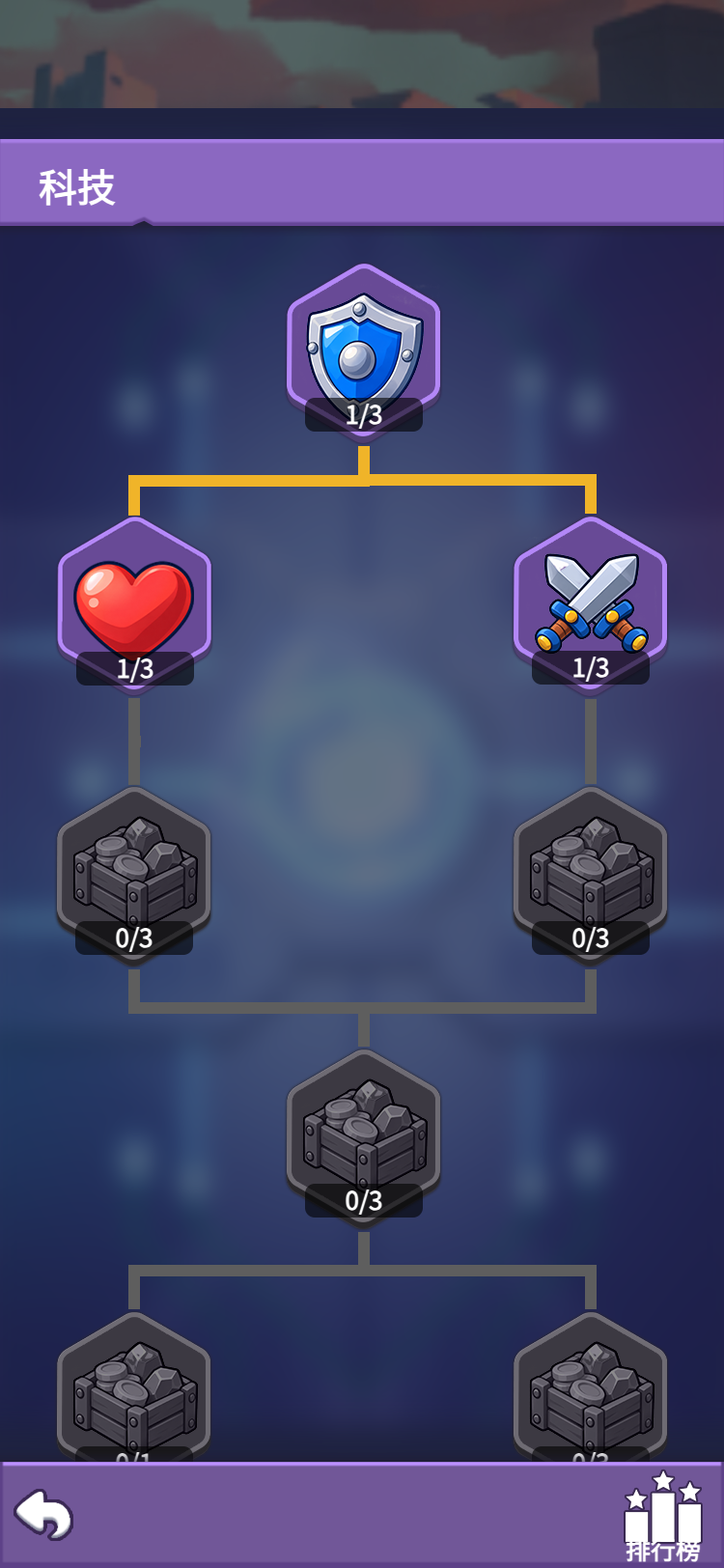
<style>
.page{position:relative;width:724px;height:1568px}
.page>*{position:absolute;margin:0}
.t1{font:38.6px "WebPSD-18463539-0-Regular";color:#ffffff;font-weight:bold}
.t2{font:25.1px "WebPSD-18463539-0-Regular";color:#ffffff;font-weight:bold}
.t3{font:25.1px "WebPSD-18463539-0-Regular";font-weight:bold}
</style>
<div class="page">
<p class="t1" style="left:37px;top:163px;width:193px;height:48px">科技</p>
<p class="t2" style="left:75px;top:921px;width:118px;height:34px">0/3</p>
<p class="t2" style="left:532px;top:921px;width:118px;height:34px">0/3</p>
<p class="t2" style="left:305px;top:1184px;width:118px;height:34px">0/3</p>
<p class="t3" style="left:75px;top:1446px;width:118px;height:34px">0/1</p>
<p class="t3" style="left:532px;top:1446px;width:118px;height:34px">0/3</p>
</div>
